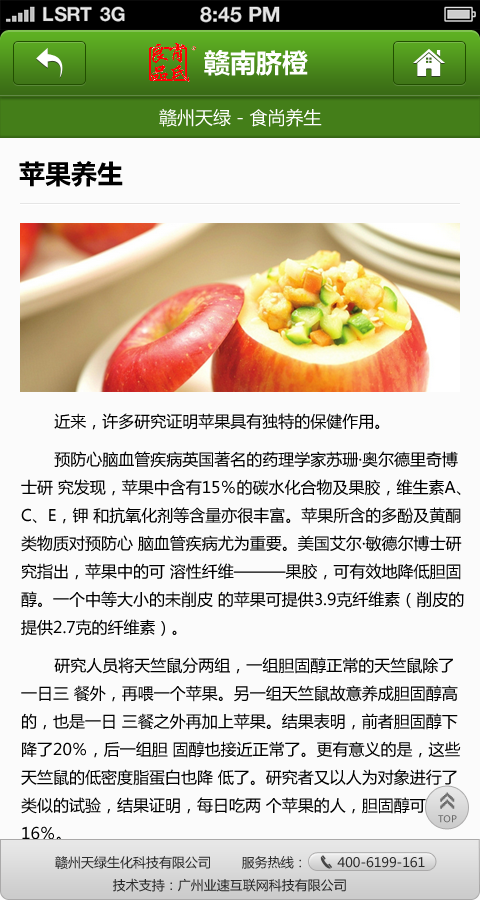
<style>
.page{position:relative;width:480px;height:900px;background:#fbfbfb}
.page>*{position:absolute;margin:0}
.t1{font:26px "MicrosoftYaHeiBold";color:#ffffff}
.t2{font:18px "MicrosoftYaHei";color:#ffffff}
.t3{font:26px "MicrosoftYaHeiBold";color:#000000}
.t4{font:16px "MicrosoftYaHei";color:#000000}
.t5{font:26px "8514oem";letter-spacing:-0.2em;color:#6f6f6f;font-weight:bold}
.t6{font:9.3px "MicrosoftYaHei";color:#686868}
.t7{font:13px "MicrosoftYaHei";color:#2c2c2c}
</style>
<div class="page">
<p class="t1" style="left:204px;top:50px;width:104px;height:26px">赣南脐橙</p>
<p class="t2" style="left:159px;top:108px;width:163px;height:19px">赣州天绿 - 食尚养生</p>
<p class="t3" style="left:19px;top:161px;width:104px;height:26px">苹果养生</p>
<p class="t4" style="left:21px;top:413px;width:443px;height:428px">近来，许多研究证明苹果具有独特的保健作用。<br> <br>       预防心脑血管疾病英国著名的药理学家苏珊·奥尔德里奇博<br>士研 究发现，苹果中含有15％的碳水化合物及果胶，维生素A、<br>C、E，钾 和抗氧化剂等含量亦很丰富。苹果所含的多酚及黄酮<br>类物质对预防心 脑血管疾病尤为重要。美国艾尔·敏德尔博士研<br>究指出，苹果中的可 溶性纤维———果胶，可有效地降低胆固<br>醇。一个中等大小的未削皮 的苹果可提供3.9克纤维素（削皮的<br>提供2.7克的纤维素）。<br><br>       研究人员将天竺鼠分两组，一组胆固醇正常的天竺鼠除了<br>一日三 餐外，再喂一个苹果。另一组天竺鼠故意养成胆固醇高<br>的，也是一日 三餐之外再加上苹果。结果表明，前者胆固醇下<br>降了20％，后一组胆 固醇也接近正常了。更有意义的是，这些<br>天竺鼠的低密度脂蛋白也降 低了。研究者又以人为对象进行了<br>类似的试验，结果证明，每日吃两 个苹果的人，胆固醇可降低<br>16％。</p>
<p class="t5" style="left:440px;top:792px;width:15px;height:17px;rotate:-90deg">&gt;&gt;</p>
<p class="t6" style="left:438px;top:815px;width:19px;height:8px">TOP</p>
<p class="t7" style="left:55px;top:856px;width:370px;height:36px">赣州天绿生化科技有限公司        服务热线：        400-6199-161<br>               技术支持：广州业速互联网科技有限公司</p>
</div>
